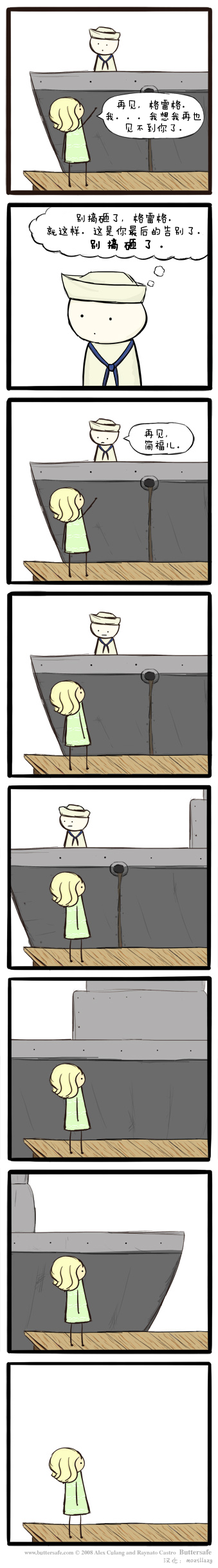
<style>
.page{position:relative;width:218px;height:1568px;background:#ffffff}
.page>*{position:absolute;margin:0}
.t1{font:10.9px/11.6px "FZMWJW--GB1-0";color:#000000}
.t2{font:11.6px/12.9px "FZMWJW--GB1-0";color:#000000}
.t3{font:11.6px/11.6px "FZMWJW--GB1-0";color:#000000}
.t4{font:12.9px/12.2px "FZMWJW--GB1-0";letter-spacing:0.34em;color:#000000;font-weight:bold}
.t5{font:7.7px "FZMWJW--GB1-0";color:#b1b1b1}
</style>
<div class="page">
<p class="t1" style="left:105px;top:100px;width:96px;height:33px">再见，格雷格。<br>我。。。我想我再也<br>     见不到你了。</p>
<p class="t2" style="left:47px;top:212px;width:153px;height:39px">别搞砸了，格雷格。<br>就这样。这是你最后的告别了<span class="t3">。<br>       </span><span class="t4">  别搞砸了。</span></p>
<p class="t1" style="left:144px;top:429px;width:35px;height:22px">再见，<br>简福儿。</p>
<p class="t5" style="left:163px;top:1557px;width:49px;height:7px">汉化：mozillazg</p>
</div>
